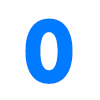
<style>
.page{position:relative;width:100px;height:100px;background:#ffffff}
.page>*{position:absolute;margin:0}
.t1{font:84.7px "FuturaBT-Heavy";letter-spacing:-0.1em;color:#007bff;font-weight:bold}
</style>
<div class="page">
<p class="t1" style="left:25px;top:18px;width:48px;height:66px">0</p>
</div>
